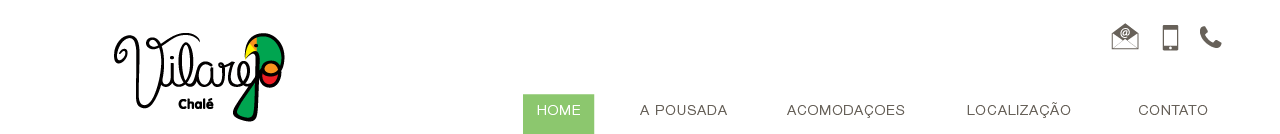
<style>
.page{position:relative;width:1280px;height:134px;background:#ffffff}
.page>*{position:absolute;margin:0}
.t1{font:14px "HelveticaNeueLTStd-Lt";letter-spacing:0.075em;color:#676159}
.t2{font:14px "HelveticaNeueLTStd-Lt";letter-spacing:0.075em;color:#ffffff}
</style>
<div class="page">
<p class="t1" style="left:967px;top:102px;width:104px;height:16px">LOCALIZAÇÃO</p>
<p class="t2" style="left:537px;top:105px;width:43px;height:10px">HOME</p>
<p class="t1" style="left:640px;top:105px;width:87px;height:10px">A POUSADA</p>
<p class="t1" style="left:787px;top:105px;width:118px;height:13px">ACOMODAÇOES</p>
<p class="t1" style="left:1139px;top:105px;width:69px;height:10px">CONTATO</p>
</div>
